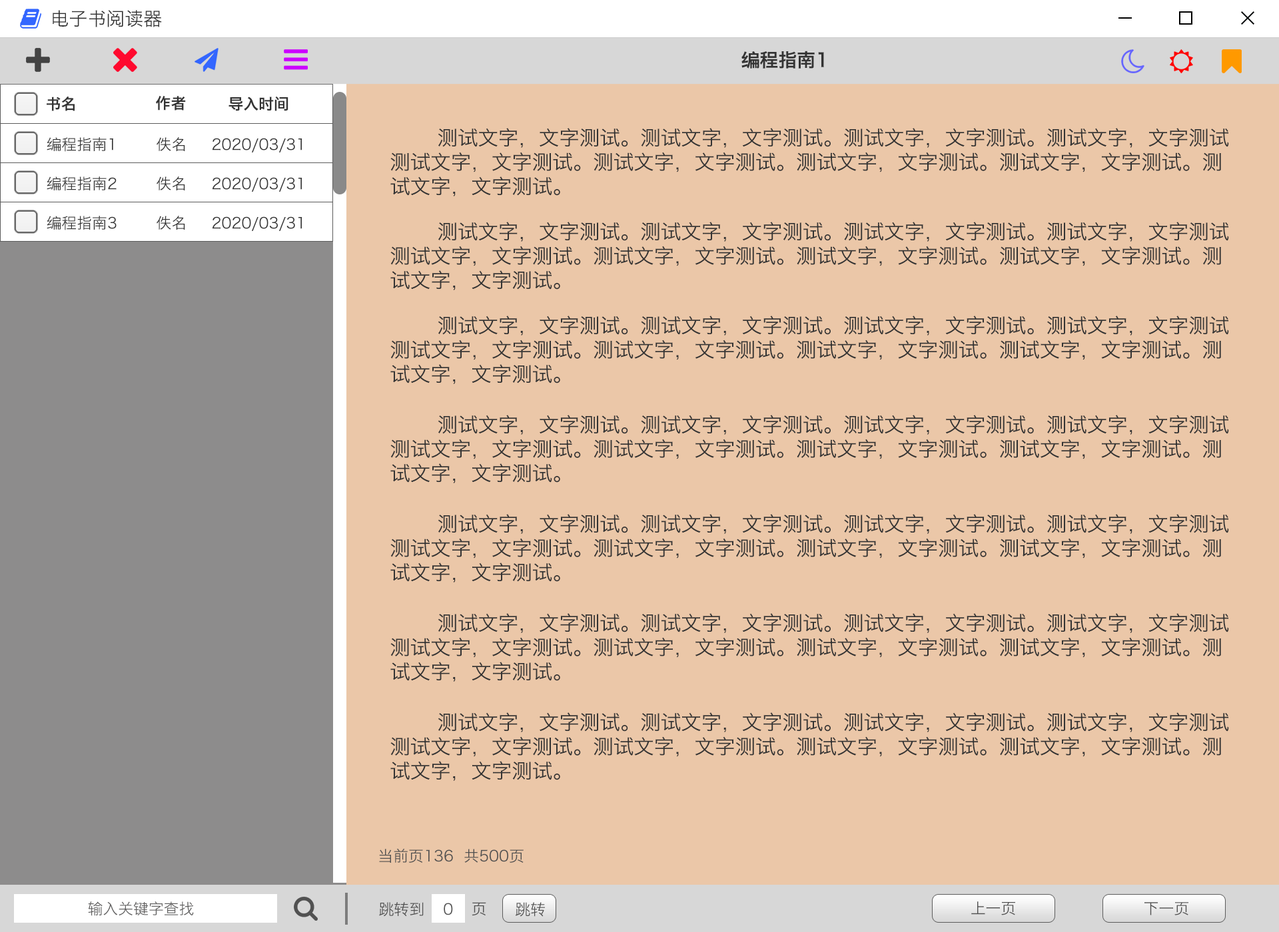
<style>
.page{position:relative;width:1279px;height:932px;background:#ebc7a8}
.page>*{position:absolute;margin:0}
.t1{font:18.6px "HiraginoSansGB-W3";color:#333333}
.t2{font:18.6px "HiraginoSansGB-W6";color:#333333}
.t3{font:15.2px "HiraginoSansGB-W6";color:#333333}
.t4{font:15.2px "HiraginoSansGB-W3";color:#333333}
.t5{font:20.3px "HiraginoSansGB-W3";color:#333333}
.t6{font:15.2px "HiraginoSansGB-W3";color:#505050}
.t7{font:15.2px "HiraginoSansGB-W3";color:#616060}
</style>
<div class="page">
<p class="t1" style="left:53px;top:10px;width:109px;height:17px">电子书阅读器</p>
<p class="t2" style="left:741px;top:51px;width:83px;height:18px">编程指南1</p>
<p class="t3" style="left:47px;top:97px;width:28px;height:14px">书名</p>
<p class="t3" style="left:156px;top:96px;width:30px;height:15px">作者</p>
<p class="t3" style="left:228px;top:97px;width:60px;height:14px">导入时间</p>
<p class="t4" style="left:47px;top:137px;width:66px;height:15px">编程指南1</p>
<p class="t4" style="left:157px;top:137px;width:28px;height:14px">佚名</p>
<p class="t4" style="left:212px;top:138px;width:90px;height:15px">2020/03/31</p>
<p class="t5" style="left:390px;top:128px;width:839px;height:68px">测试文字，文字测试。测试文字，文字测试。测试文字，文字测试。测试文字，文字测试<br>测试文字，文字测试。测试文字，文字测试。测试文字，文字测试。测试文字，文字测试。测<br>试文字，文字测试。</p>
<p class="t4" style="left:47px;top:177px;width:70px;height:14px">编程指南2</p>
<p class="t4" style="left:157px;top:177px;width:28px;height:13px">佚名</p>
<p class="t4" style="left:212px;top:177px;width:90px;height:15px">2020/03/31</p>
<p class="t4" style="left:47px;top:216px;width:70px;height:14px">编程指南3</p>
<p class="t4" style="left:157px;top:216px;width:28px;height:14px">佚名</p>
<p class="t4" style="left:212px;top:216px;width:90px;height:15px">2020/03/31</p>
<p class="t5" style="left:390px;top:222px;width:839px;height:68px">测试文字，文字测试。测试文字，文字测试。测试文字，文字测试。测试文字，文字测试<br>测试文字，文字测试。测试文字，文字测试。测试文字，文字测试。测试文字，文字测试。测<br>试文字，文字测试。</p>
<p class="t5" style="left:390px;top:316px;width:839px;height:68px">测试文字，文字测试。测试文字，文字测试。测试文字，文字测试。测试文字，文字测试<br>测试文字，文字测试。测试文字，文字测试。测试文字，文字测试。测试文字，文字测试。测<br>试文字，文字测试。</p>
<p class="t5" style="left:390px;top:415px;width:839px;height:69px">测试文字，文字测试。测试文字，文字测试。测试文字，文字测试。测试文字，文字测试<br>测试文字，文字测试。测试文字，文字测试。测试文字，文字测试。测试文字，文字测试。测<br>试文字，文字测试。</p>
<p class="t5" style="left:390px;top:514px;width:839px;height:69px">测试文字，文字测试。测试文字，文字测试。测试文字，文字测试。测试文字，文字测试<br>测试文字，文字测试。测试文字，文字测试。测试文字，文字测试。测试文字，文字测试。测<br>试文字，文字测试。</p>
<p class="t5" style="left:390px;top:613px;width:839px;height:69px">测试文字，文字测试。测试文字，文字测试。测试文字，文字测试。测试文字，文字测试<br>测试文字，文字测试。测试文字，文字测试。测试文字，文字测试。测试文字，文字测试。测<br>试文字，文字测试。</p>
<p class="t5" style="left:390px;top:713px;width:839px;height:68px">测试文字，文字测试。测试文字，文字测试。测试文字，文字测试。测试文字，文字测试<br>测试文字，文字测试。测试文字，文字测试。测试文字，文字测试。测试文字，文字测试。测<br>试文字，文字测试。</p>
<p class="t6" style="left:379px;top:849px;width:145px;height:14px">当前页136  共500页</p>
<p class="t7" style="left:88px;top:902px;width:106px;height:14px">输入关键字查找</p>
<p class="t6" style="left:379px;top:902px;width:45px;height:15px">跳转到</p>
<p class="t6" style="left:444px;top:903px;width:9px;height:13px">0</p>
<p class="t6" style="left:472px;top:902px;width:14px;height:14px">页</p>
<p class="t6" style="left:516px;top:902px;width:29px;height:15px">跳转</p>
<p class="t6" style="left:971px;top:902px;width:44px;height:14px">上一页</p>
<p class="t6" style="left:1144px;top:902px;width:44px;height:14px">下一页</p>
</div>
